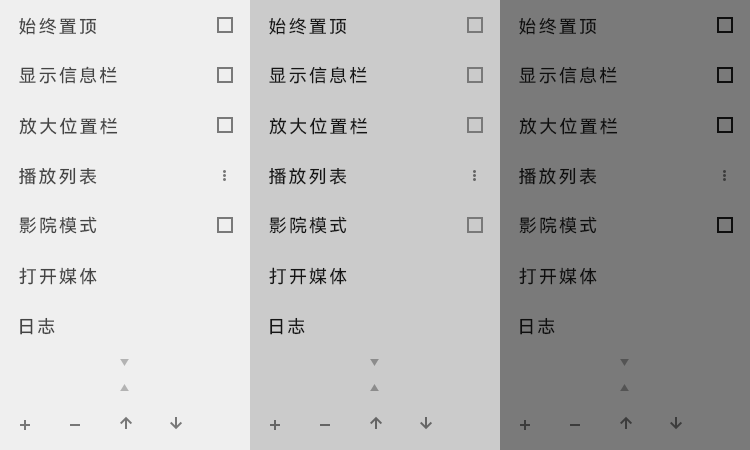
<style>
.page{position:relative;width:750px;height:450px;background:#cbcbcb}
.page>*{position:absolute;margin:0}
.t1{font:18px "HarmonyOS_Sans_SC";letter-spacing:0.12em;color:#444444}
.t2{font:18px "HarmonyOS_Sans_SC";letter-spacing:0.12em;color:#151515}
.t3{font:18px "HarmonyOS_Sans_SC";letter-spacing:0.12em;color:#0e0e0e}
</style>
<div class="page">
<p class="t1" style="left:19px;top:17px;width:78px;height:18px">始终置顶</p>
<p class="t2" style="left:269px;top:17px;width:78px;height:18px">始终置顶</p>
<p class="t3" style="left:519px;top:17px;width:78px;height:18px">始终置顶</p>
<p class="t1" style="left:19px;top:66px;width:98px;height:18px">显示信息栏</p>
<p class="t2" style="left:269px;top:66px;width:98px;height:18px">显示信息栏</p>
<p class="t3" style="left:519px;top:66px;width:98px;height:18px">显示信息栏</p>
<p class="t1" style="left:19px;top:117px;width:99px;height:18px">放大位置栏</p>
<p class="t2" style="left:269px;top:117px;width:99px;height:18px">放大位置栏</p>
<p class="t3" style="left:519px;top:117px;width:99px;height:18px">放大位置栏</p>
<p class="t1" style="left:19px;top:167px;width:78px;height:18px">播放列表</p>
<p class="t2" style="left:269px;top:167px;width:78px;height:18px">播放列表</p>
<p class="t3" style="left:519px;top:167px;width:78px;height:18px">播放列表</p>
<p class="t1" style="left:19px;top:216px;width:78px;height:18px">影院模式</p>
<p class="t2" style="left:269px;top:216px;width:78px;height:18px">影院模式</p>
<p class="t3" style="left:519px;top:216px;width:78px;height:18px">影院模式</p>
<p class="t1" style="left:19px;top:267px;width:78px;height:18px">打开媒体</p>
<p class="t2" style="left:269px;top:267px;width:78px;height:18px">打开媒体</p>
<p class="t3" style="left:519px;top:267px;width:78px;height:18px">打开媒体</p>
<p class="t1" style="left:20px;top:317px;width:35px;height:18px">日志</p>
<p class="t2" style="left:270px;top:317px;width:35px;height:18px">日志</p>
<p class="t3" style="left:520px;top:317px;width:35px;height:18px">日志</p>
</div>
